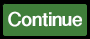
<style>
.page{position:relative;width:90px;height:39px;background:#407e3a}
.page>*{position:absolute;margin:0}
.t1{font:20px "GurmukhiSangamMN-Bold";color:#ffffff}
</style>
<div class="page">
<p class="t1" style="left:8px;top:11px;width:74px;height:16px">Continue</p>
</div>
